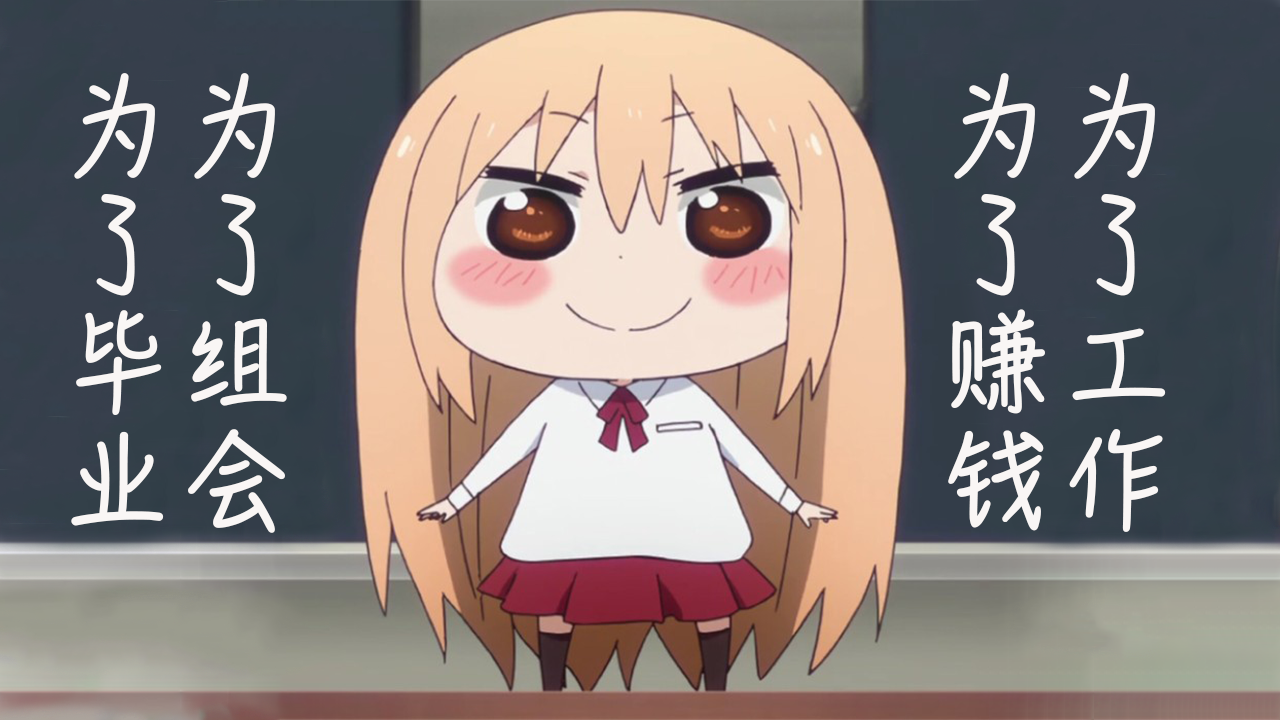
<style>
.page{position:relative;width:1280px;height:720px}
.page>*{position:absolute;margin:0}
.t1{font:101px/40px "HanziPenSC-W3";color:#f9f6f5;font-weight:bold}
</style>
<div class="page">
<p class="t1" style="left:71px;top:73px;width:1095px;height:460px">为了工作<br><br><br>为了赚钱<br><br><br><br><br><br><br><br><br><br><br><br><br><br><br><br><br><br><br>为了组会<br><br><br>为了毕业</p>
</div>
